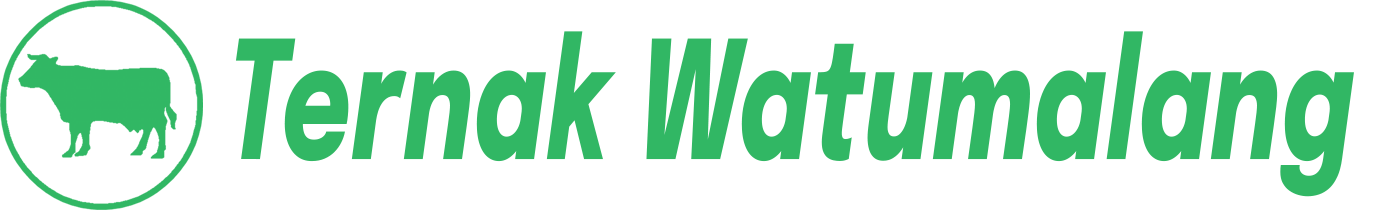
<style>
.page{position:relative;width:1390px;height:210px;background:#ffffff}
.page>*{position:absolute;margin:0}
.t1{font:163.3px "Epilogue-ExtraBoldItalic";letter-spacing:0.01em;color:#32b865;scale:0.65 1}
</style>
<div class="page">
<p class="t1" style="left:235px;top:31px;width:1119px;height:166px">Ternak Watumalang</p>
</div>
